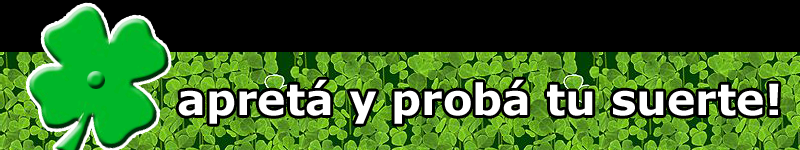
<style>
.page{position:relative;width:800px;height:150px;background:#000000}
.page>*{position:absolute;margin:0}
.t1{font:43px "Verdana-Bold";color:#ffffff}
</style>
<div class="page">
<p class="t1" style="left:178px;top:79px;width:601px;height:45px">apretá y probá tu suerte!</p>
</div>
